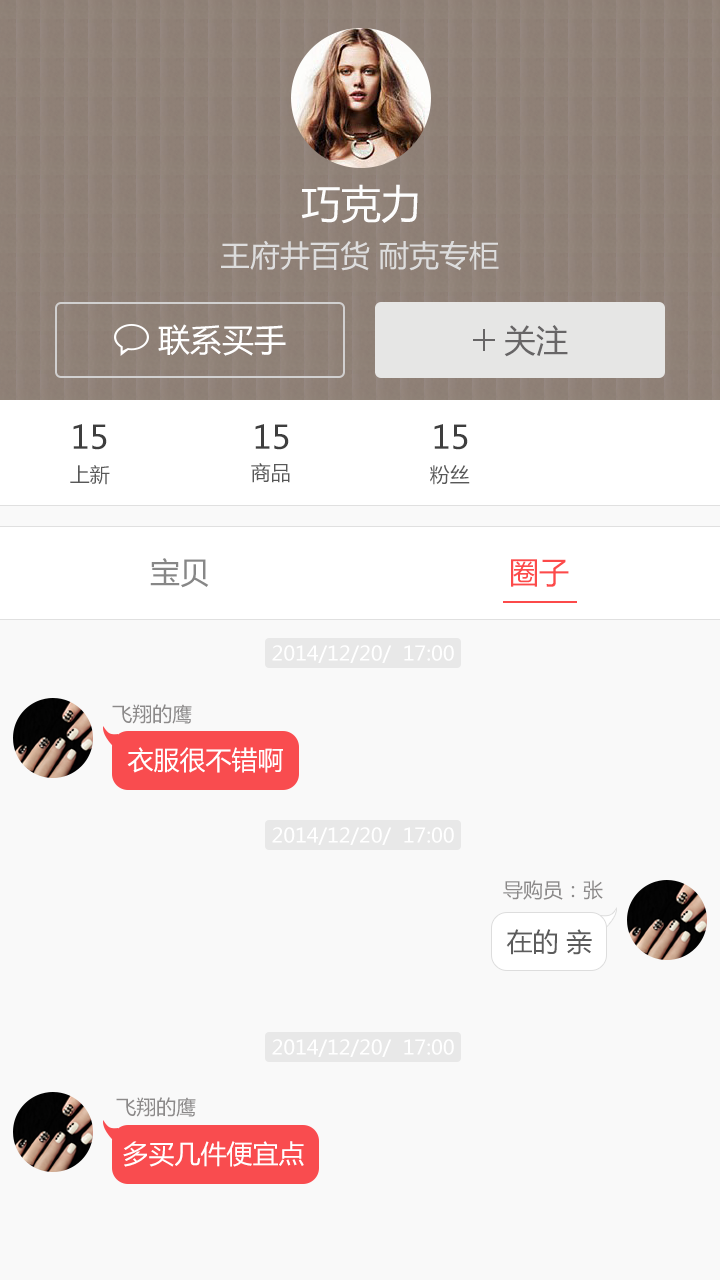
<style>
.page{position:relative;width:720px;height:1280px;background:#f9f9f9}
.page>*{position:absolute;margin:0}
.t1{font:40px "MicrosoftYaHei";color:#fdfdfd}
.t2{font:30px "MicrosoftYaHei";color:#dddddd}
.t3{font:32px "MicrosoftYaHei";color:#ffffff}
.t4{font:32px "MicrosoftYaHei";color:#676566}
.t5{font:32px "MicrosoftYaHei";color:#3e3e3e}
.t6{font:20px "MicrosoftYaHei";color:#585858}
.t7{font:30px "MicrosoftYaHei";color:#878787}
.t8{font:30px "MicrosoftYaHei";color:#fc4a4a}
.t9{font:20px "MicrosoftYaHei";color:#ffffff}
.t10{font:20px "MicrosoftYaHei";color:#8c8a8a}
.t11{font:26px "MicrosoftYaHei";color:#ffffff}
.t12{font:26px "MicrosoftYaHei";color:#5c5c5c}
</style>
<div class="page">
<p class="t1" style="left:301px;top:184px;width:117px;height:40px">巧克力</p>
<p class="t2" style="left:221px;top:240px;width:278px;height:31px">王府井百货 耐克专柜</p>
<p class="t3" style="left:158px;top:324px;width:128px;height:32px">联系买手</p>
<p class="t4" style="left:504px;top:325px;width:64px;height:32px">关注</p>
<p class="t5" style="left:73px;top:424px;width:34px;height:26px">15</p>
<p class="t5" style="left:255px;top:424px;width:34px;height:26px">15</p>
<p class="t5" style="left:434px;top:424px;width:34px;height:26px">15</p>
<p class="t6" style="left:70px;top:465px;width:40px;height:20px">上新</p>
<p class="t6" style="left:251px;top:463px;width:39px;height:20px">商品</p>
<p class="t6" style="left:430px;top:465px;width:40px;height:20px">粉丝</p>
<p class="t7" style="left:150px;top:558px;width:59px;height:30px">宝贝</p>
<p class="t8" style="left:511px;top:559px;width:58px;height:28px">圈子</p>
<p class="t9" style="left:272px;top:645px;width:182px;height:18px">2014/12/20/  17:00</p>
<p class="t10" style="left:112px;top:704px;width:80px;height:20px">飞翔的鹰</p>
<p class="t11" style="left:127px;top:747px;width:156px;height:26px">衣服很不错啊</p>
<p class="t9" style="left:272px;top:827px;width:182px;height:18px">2014/12/20/  17:00</p>
<p class="t10" style="left:503px;top:880px;width:100px;height:20px">导购员：张</p>
<p class="t12" style="left:506px;top:929px;width:86px;height:26px">在的 亲</p>
<p class="t9" style="left:272px;top:1039px;width:182px;height:18px">2014/12/20/  17:00</p>
<p class="t10" style="left:116px;top:1097px;width:80px;height:20px">飞翔的鹰</p>
<p class="t11" style="left:123px;top:1141px;width:181px;height:26px">多买几件便宜点</p>
</div>
